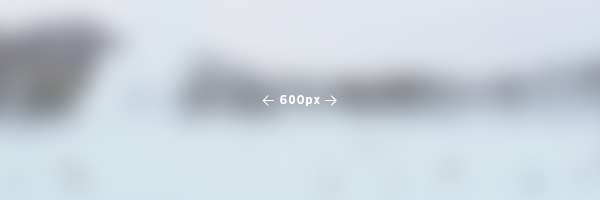
<style>
.page{position:relative;width:600px;height:200px}
.page>*{position:absolute;margin:0}
.t1{font:12px "GothamNarrow-Bold";letter-spacing:0.1em;color:#ffffff}
.t2{font:12px "DIN-Regular";letter-spacing:0.1em;color:#ffffff}
</style>
<div class="page">
<p class="t1" style="left:262px;top:95px;width:75px;height:11px"><span class="t2">&lt; </span>600px <span class="t2">&gt;</span></p>
</div>
